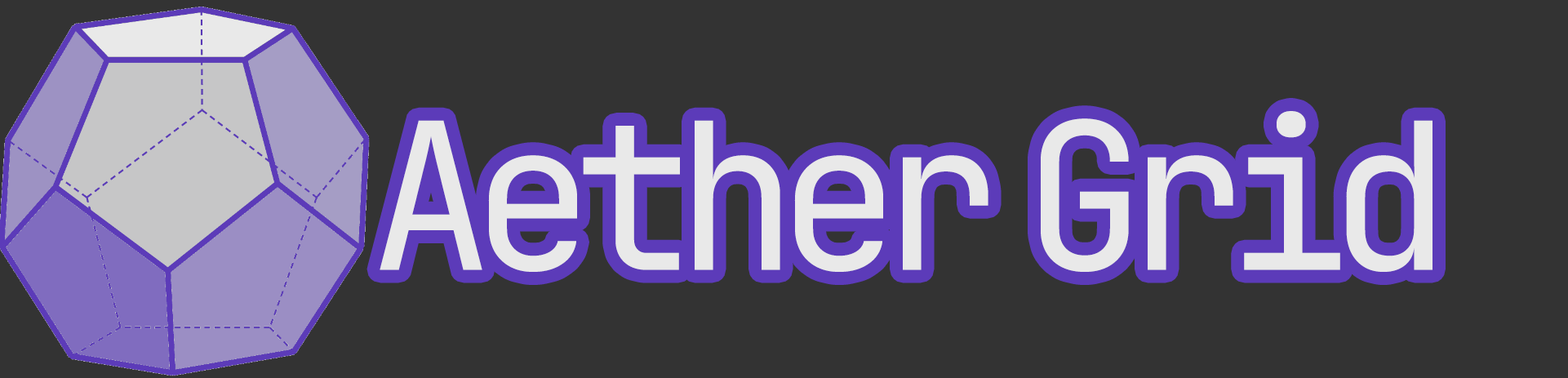
<style>
.page{position:relative;width:1568px;height:378px;background:#333333}
.page>*{position:absolute;margin:0}
.t1{font:204.1px "JetBrainsMonoNFM-Regular";letter-spacing:-0.1em;color:#e9e9e9}
</style>
<div class="page">
<p class="t1" style="left:380px;top:111px;width:1053px;height:161px">Aether Grid</p>
</div>
